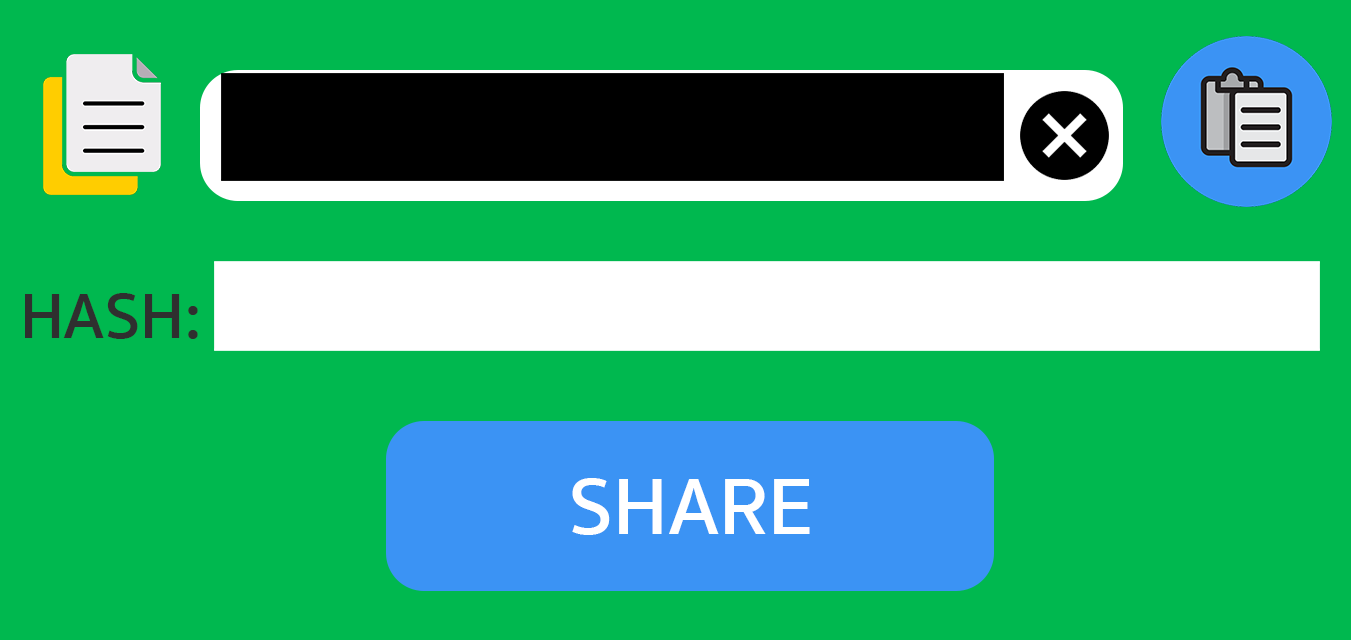
<style>
.page{position:relative;width:1351px;height:640px;background:#00b84f}
.page>*{position:absolute;margin:0}
.t1{font:65.8px "SukhumvitSet-SemiBold";color:#2f2f2f}
.t2{font:82.5px "SukhumvitSet-SemiBold";color:#ffffff}
</style>
<div class="page">
<p class="t1" style="left:25px;top:293px;width:173px;height:46px">HASH:</p>
<p class="t2" style="left:572px;top:478px;width:238px;height:57px">SHARE</p>
</div>
